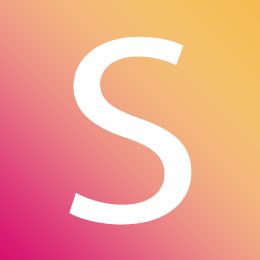
<style>
.page{position:relative;width:260px;height:260px}
.page>*{position:absolute;margin:0}
.t1{font:269.5px "MyriadPro-Regular";color:#ffffff;scale:1.11 1}
</style>
<div class="page">
<p class="t1" style="left:69px;top:36px;width:123px;height:189px">S</p>
</div>
